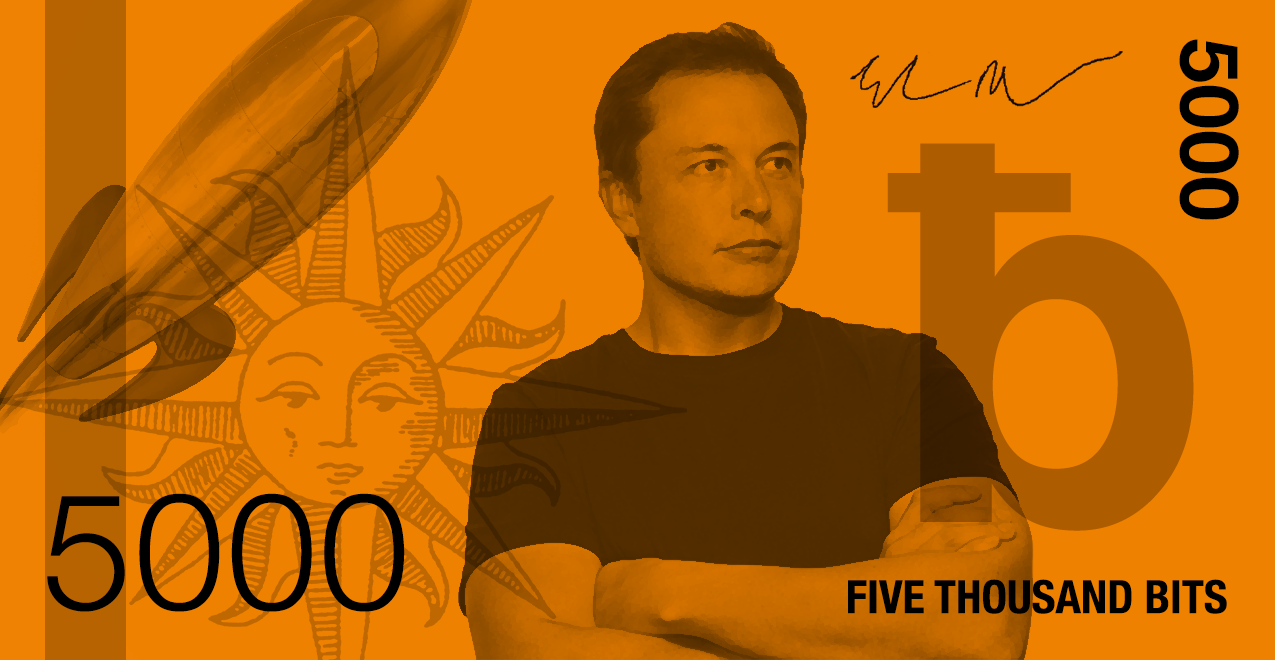
<style>
.page{position:relative;width:1275px;height:660px;background:#ef8100}
.page>*{position:absolute;margin:0}
.t1{font:81.4px "HelveticaNeue-Bold";letter-spacing:0.01em;color:#000000}
.t2{font:526.2px "Helvetica-Bold";color:#ae5c00}
.t3{font:526.2px "HelveticaNeue";color:#ae5c00}
.t4{font:163.3px "HelveticaNeue-Light";letter-spacing:0.01em;color:#000000}
.t5{font:45.8px "HelveticaNeue-CondensedBold";color:#000000}
</style>
<div class="page">
<p class="t1" style="left:1179px;top:39px;width:60px;height:181px;rotate:90deg">5000</p>
<p class="t2" style="left:887px;top:143px;width:307px;height:388px"><span class="t3"> </span>ƀ</p>
<p class="t4" style="left:47px;top:493px;width:358px;height:119px">5000</p>
<p class="t5" style="left:848px;top:579px;width:379px;height:35px">FIVE THOUSAND BITS</p>
</div>
